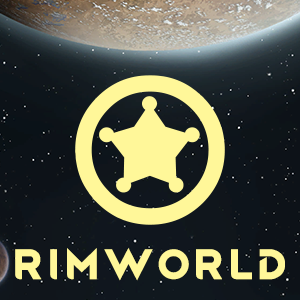
<style>
.page{position:relative;width:300px;height:300px}
.page>*{position:absolute;margin:0}
.t1{font:36px "RimWordFont";letter-spacing:0.1em;color:#fff799}
</style>
<div class="page">
<p class="t1" style="left:15px;top:248px;width:270px;height:33px">rimworld</p>
</div>
